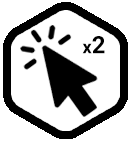
<style>
.page{position:relative;width:132px;height:143px;background:#ffffff}
.page>*{position:absolute;margin:0}
.t1{font:18px "Roboto-Bold";color:#000000}
.t2{font:24px "Roboto-Bold";color:#000000}
</style>
<div class="page">
<p class="t1" style="left:82px;top:36px;width:23px;height:18px">x<span class="t2">2</span></p>
</div>
